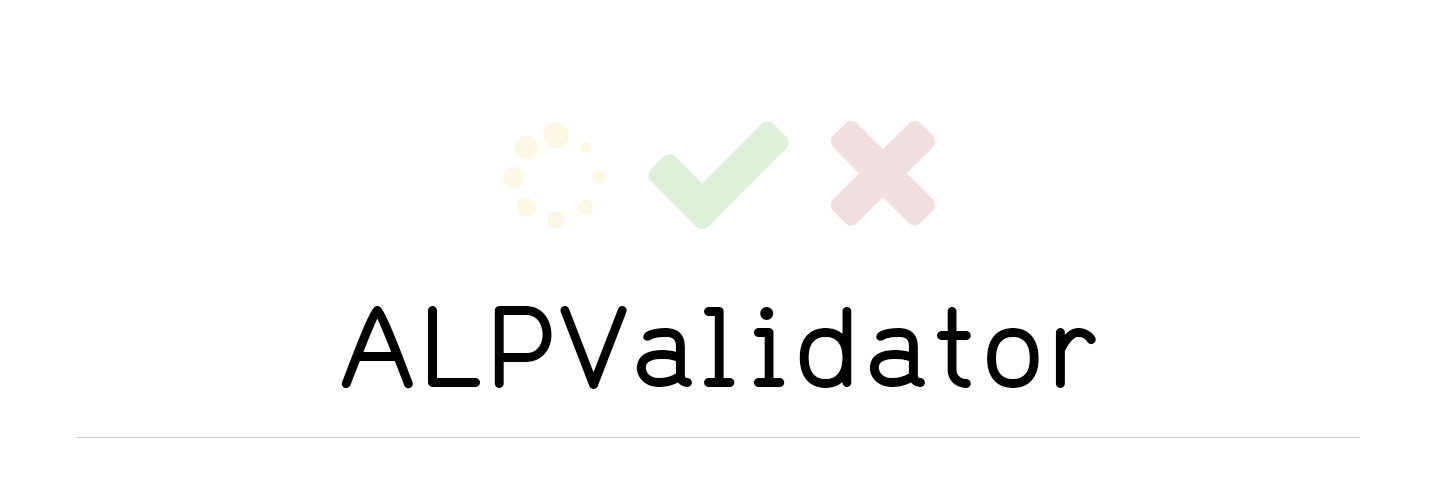
<style>
.page{position:relative;width:1440px;height:486px;background:#ffffff}
.page>*{position:absolute;margin:0}
.t1{font:109.9px "Range";color:#000000}
</style>
<div class="page">
<p class="t1" style="left:341px;top:305px;width:755px;height:84px">ALPValidator</p>
</div>
